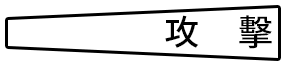
<style>
.page{position:relative;width:286px;height:66px;background:#ffffff}
.page>*{position:absolute;margin:0}
.t1{font:35px "NotoSansCJKtc-Medium";letter-spacing:0.06em;color:#000000}
</style>
<div class="page">
<p class="t1" style="left:165px;top:15px;width:107px;height:34px">攻　擊</p>
</div>
